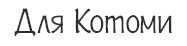
<style>
.page{position:relative;width:187px;height:46px;background:#ffffff}
.page>*{position:absolute;margin:0}
.t1{font:35px "Plainot";color:#2e2e2e}
</style>
<div class="page">
<p class="t1" style="left:14px;top:8px;width:158px;height:28px">Для Котоми</p>
</div>
